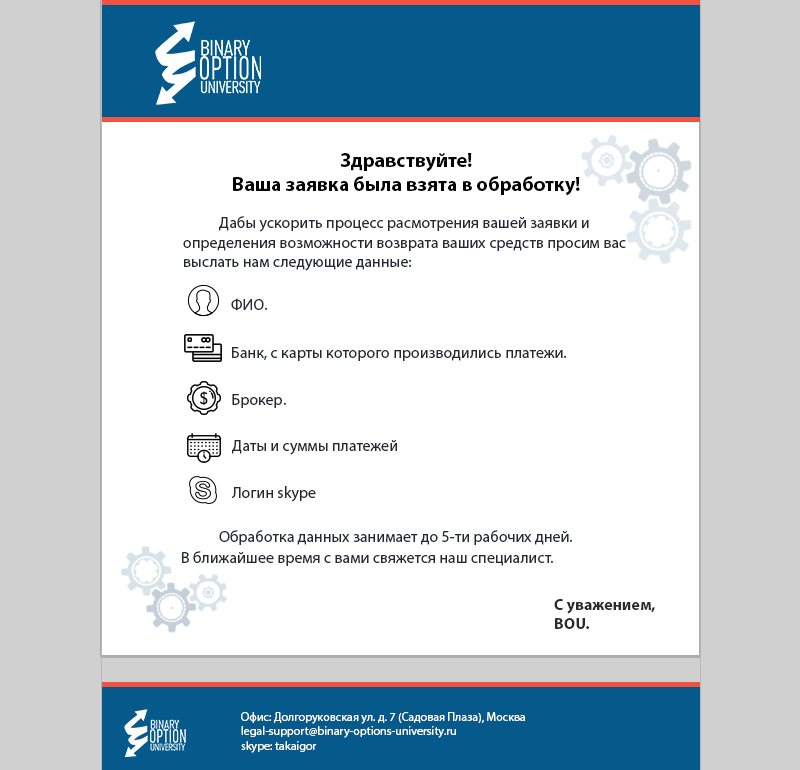
<style>
.page{position:relative;width:800px;height:770px;background:#ffffff}
.page>*{position:absolute;margin:0}
.t1{font:20px "MyriadPro-Bold";color:#040404}
.t2{font:16px "MyriadPro-Regular";color:#232833}
.t3{font:16px "MyriadPro-Bold";color:#2a2a2b}
.t4{font:12px "MyriadPro-Regular";color:#fefeff}
</style>
<div class="page">
<p class="t1" style="left:233px;top:153px;width:347px;height:43px;text-align:center">Здравствуйте!<br>Ваша заявка была взята в обработку!</p>
<p class="t2" style="left:183px;top:216px;width:443px;height:55px">Дабы ускорить процесс расмотрения вашей заявки и определения возможности возврата ваших средств просим вас выслать нам следующие данные:</p>
<p class="t2" style="left:231px;top:298px;width:37px;height:13px">ФИО.</p>
<p class="t2" style="left:232px;top:347px;width:335px;height:14px">Банк, с карты которого производились платежи.</p>
<p class="t2" style="left:232px;top:394px;width:54px;height:14px">Брокер.</p>
<p class="t2" style="left:232px;top:440px;width:165px;height:15px">Даты и суммы платежей</p>
<p class="t2" style="left:232px;top:486px;width:84px;height:16px">Логин skype</p>
<p class="t2" style="left:219px;top:530px;width:354px;height:15px">Обработка данных занимает до 5-ти рабочих дней.</p>
<p class="t2" style="left:182px;top:551px;width:371px;height:15px">В ближайшее время с вами свяжется наш специалист.</p>
<p class="t3" style="left:554px;top:599px;width:101px;height:30px">С уважением,<br>BOU.</p>
<p class="t4" style="left:241px;top:712px;width:285px;height:41px">Офис: Долгоруковская ул. д. 7 (Садовая Плаза), Москва<br>legal-support@binary-options-university.ru <br>skype: takaigor</p>
</div>
